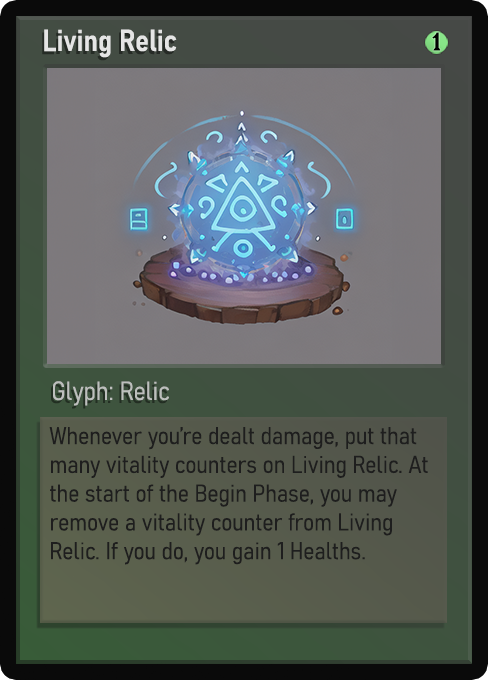
<style>
.page{position:relative;width:488px;height:680px}
.page>*{position:absolute;margin:0}
.t1{font:30px "Bahnschrift-SemiBoldSemiCondensed";color:#f2f2f2;font-weight:bold}
.t2{font:25px "WTRRoycroft";color:#000000;font-weight:bold;scale:1.09 1}
.t3{font:26px "Bahnschrift-LightSemiCondensed";color:#c8c8c8;font-weight:bold}
.t4{font:24px "Bahnschrift-LightSemiCondensed";color:#1e1e1e;font-weight:bold}
</style>
<div class="page">
<p class="t1" style="left:44px;top:29px;width:133px;height:29px;opacity:0.9">Living Relic</p>
<p class="t2" style="left:432px;top:32px;width:9px;height:19px">1</p>
<p class="t3" style="left:53px;top:381px;width:116px;height:25px;opacity:0.9">Glyph: Relic</p>
<p class="t4" style="left:49px;top:427px;width:379px;height:138px">Whenever you’re dealt damage, put that many vitality counters on Living Relic. At the start of the Begin Phase, you may remove a vitality counter from Living Relic. If you do, you gain 1 Healths.</p>
</div>
